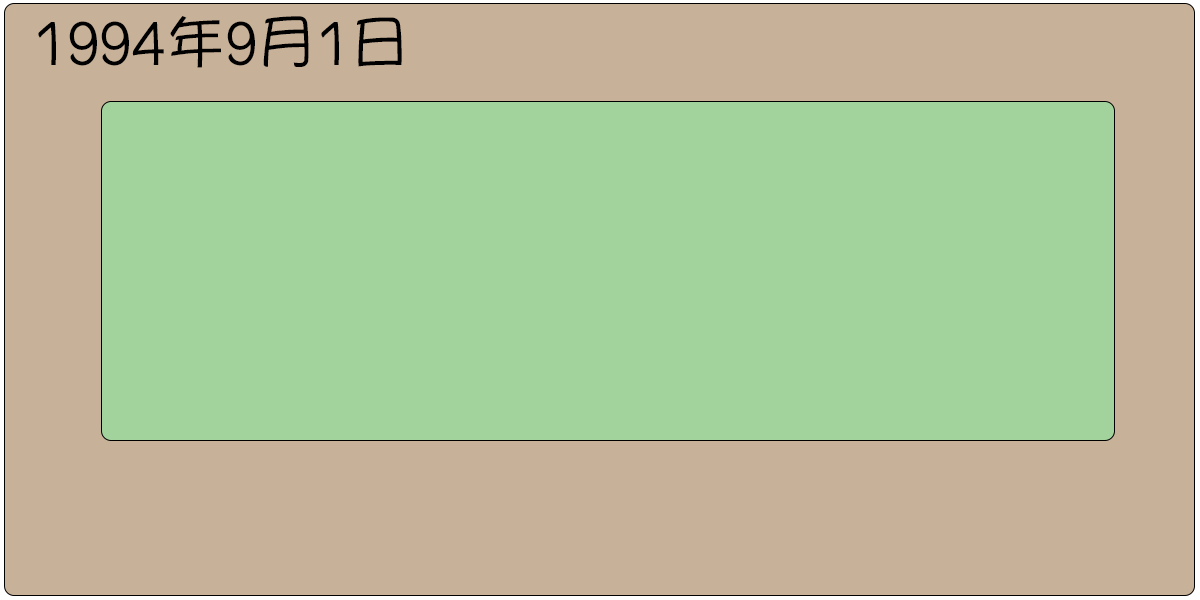
<style>
.page{position:relative;width:1200px;height:600px;background:#c7b299}
.page>*{position:absolute;margin:0}
.t1{font:60px "YuppyTC-Regular";color:#000000}
</style>
<div class="page">
<p class="t1" style="left:38px;top:16px;width:364px;height:52px">1994年9月1日</p>
</div>
